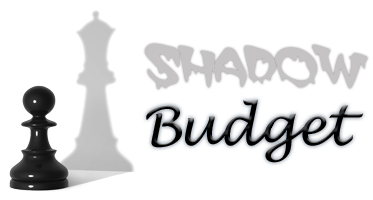
<style>
.page{position:relative;width:373px;height:200px;background:#ffffff}
.page>*{position:absolute;margin:0}
.t1{font:55px "MATTEROFFACT";letter-spacing:-0.02em;color:#c5c3c3}
.t2{font:53px "LucidaHandwriting-Italic";letter-spacing:-0.02em;color:#000000}
</style>
<div class="page">
<p class="t1" style="left:145px;top:43px;width:223px;height:47px">Shadow</p>
<p class="t2" style="left:146px;top:99px;width:218px;height:64px">Budget</p>
</div>
